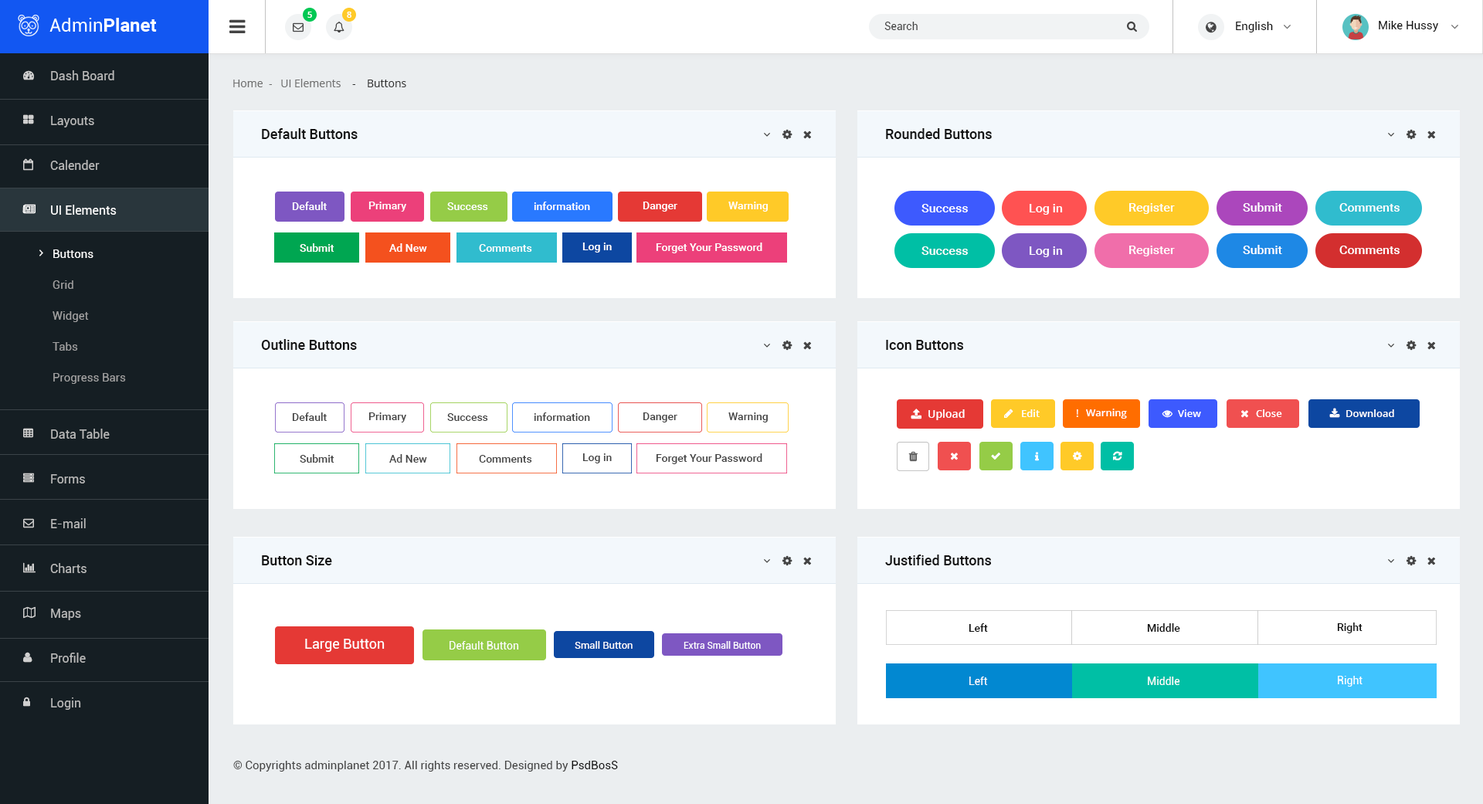
<style>
.page{position:relative;width:1483px;height:804px;background:#ffffff}
.page>*{position:absolute;margin:0}
.t1{font:8.5px "OpenSans-Semibold";color:#ffffff}
.t2{font:10.8px "Roboto-Regular";color:#444444}
.t3{font:11.6px "Roboto-Regular";color:#111111}
.t4{font:12.4px/44.8px "Roboto-Regular";color:#b9b9b9}
.t5{font:12.4px/44.8px "Roboto-Regular";color:#ffffff}
.t6{font:10.8px "OpenSans";color:#707070}
.t7{font:10.8px "OpenSans";color:#333333}
.t8{font:13.9px "Roboto-Medium";color:#111111}
.t9{font:10.8px "Roboto-Medium";color:#ffffff}
.t10{font:12.4px "Roboto-Medium";color:#ffffff}
.t11{font:11.6px/30.9px "Roboto-Regular";color:#a0a0a0}
.t12{font:11.6px/30.9px "Roboto-Regular";color:#ffffff}
.t13{font:10.8px "Roboto-Medium";color:#444444}
.t14{font:10.8px "OpenSans-Semibold";color:#ffffff}
.t15{font:10px "OpenSans-Semibold";color:#ffffff}
.t16{font:10.8px "OpenSans";color:#ffffff}
.t17{font:10.8px "Roboto-Medium";color:#111111}
.t18{font:13.9px "Roboto-Regular";color:#ffffff}
.t19{font:10.8px "Roboto-Regular";color:#ffffff}
.t20{font:10px "Roboto-Regular";color:#ffffff}
.t21{font:9.3px "Roboto-Regular";color:#ffffff}
.t22{font:11.6px "Roboto-Regular";color:#444444}
</style>
<div class="page">
<p class="t1" style="left:307px;top:12px;width:5px;height:6px">5</p>
<p class="t1" style="left:347px;top:12px;width:4px;height:6px">8</p>
<p class="t2" style="left:884px;top:22px;width:34px;height:8px">Search</p>
<p class="t3" style="left:1236px;top:22px;width:37px;height:10px">English</p>
<p class="t3" style="left:1379px;top:21px;width:59px;height:11px">Mike Hussy</p>
<p class="t4" style="left:50px;top:70px;width:67px;height:640px">Dash Board<br>Layouts<br>Calender<br><span class="t5">UI Elements<br></span><br><br><br><br>Data Table<br>Forms<br>E-mail<br>Charts<br>Maps<br>Profile<br>Login</p>
<p class="t6" style="left:233px;top:79px;width:173px;height:8px">Home  -   UI Elements   <span class="t7"> -    Buttons</span></p>
<p class="t8" style="left:262px;top:128px;width:96px;height:11px">Default Buttons</p>
<p class="t8" style="left:886px;top:128px;width:106px;height:11px">Rounded Buttons</p>
<p class="t9" style="left:292px;top:202px;width:35px;height:8px">Default</p>
<p class="t9" style="left:368px;top:202px;width:38px;height:10px">Primary</p>
<p class="t9" style="left:447px;top:202px;width:41px;height:8px">Success</p>
<p class="t9" style="left:534px;top:202px;width:56px;height:8px">information</p>
<p class="t9" style="left:643px;top:202px;width:34px;height:10px">Danger</p>
<p class="t9" style="left:728px;top:202px;width:40px;height:10px">Warning</p>
<p class="t10" style="left:921px;top:204px;width:47px;height:8px">Success</p>
<p class="t10" style="left:1030px;top:204px;width:33px;height:11px">Log in</p>
<p class="t10" style="left:1129px;top:203px;width:46px;height:11px">Register</p>
<p class="t10" style="left:1243px;top:202px;width:39px;height:10px">Submit</p>
<p class="t10" style="left:1339px;top:203px;width:61px;height:9px">Comments</p>
<p class="t9" style="left:300px;top:243px;width:34px;height:9px">Submit</p>
<p class="t9" style="left:389px;top:243px;width:38px;height:9px">Ad New</p>
<p class="t9" style="left:479px;top:244px;width:53px;height:8px">Comments</p>
<p class="t9" style="left:582px;top:243px;width:30px;height:10px">Log in</p>
<p class="t9" style="left:656px;top:243px;width:106px;height:10px">Forget Your Password</p>
<p class="t10" style="left:1129px;top:246px;width:46px;height:10px">Register</p>
<p class="t10" style="left:1243px;top:245px;width:39px;height:9px">Submit</p>
<p class="t10" style="left:1339px;top:246px;width:61px;height:8px">Comments</p>
<p class="t11" style="left:53px;top:249px;width:73px;height:135px"><span class="t12">Buttons<br></span>Grid<br>Widget<br>Tabs<br>Progress Bars</p>
<p class="t10" style="left:921px;top:246px;width:47px;height:9px">Success</p>
<p class="t10" style="left:1030px;top:246px;width:33px;height:11px">Log in</p>
<p class="t8" style="left:261px;top:339px;width:96px;height:11px">Outline Buttons</p>
<p class="t8" style="left:886px;top:340px;width:78px;height:10px">Icon Buttons</p>
<p class="t13" style="left:292px;top:412px;width:35px;height:9px">Default</p>
<p class="t13" style="left:368px;top:412px;width:38px;height:11px">Primary</p>
<p class="t13" style="left:447px;top:413px;width:41px;height:8px">Success</p>
<p class="t13" style="left:534px;top:412px;width:56px;height:9px">information</p>
<p class="t13" style="left:643px;top:412px;width:34px;height:11px">Danger</p>
<p class="t13" style="left:728px;top:412px;width:40px;height:11px">Warning</p>
<p class="t14" style="left:928px;top:409px;width:37px;height:11px">Upload</p>
<p class="t15" style="left:1022px;top:409px;width:18px;height:8px">Edit</p>
<p class="t16" style="left:1076px;top:409px;width:2px;height:8px">!</p>
<p class="t15" style="left:1086px;top:409px;width:41px;height:10px">Warning</p>
<p class="t15" style="left:1178px;top:409px;width:23px;height:8px">View</p>
<p class="t15" style="left:1256px;top:409px;width:26px;height:8px">Close</p>
<p class="t15" style="left:1346px;top:409px;width:48px;height:8px">Download</p>
<p class="t13" style="left:300px;top:454px;width:34px;height:9px">Submit</p>
<p class="t13" style="left:389px;top:454px;width:38px;height:9px">Ad New</p>
<p class="t13" style="left:479px;top:455px;width:53px;height:8px">Comments</p>
<p class="t13" style="left:582px;top:453px;width:30px;height:10px">Log in</p>
<p class="t13" style="left:656px;top:453px;width:106px;height:11px">Forget Your Password</p>
<p class="t8" style="left:262px;top:555px;width:70px;height:10px">Button Size</p>
<p class="t8" style="left:885px;top:555px;width:107px;height:10px">Justified Buttons</p>
<p class="t17" style="left:969px;top:623px;width:19px;height:9px">Left</p>
<p class="t17" style="left:1147px;top:623px;width:33px;height:9px">Middle</p>
<p class="t17" style="left:1337px;top:623px;width:26px;height:10px">Right</p>
<p class="t18" style="left:305px;top:639px;width:80px;height:13px">Large Button</p>
<p class="t19" style="left:450px;top:641px;width:69px;height:9px">Default Button</p>
<p class="t20" style="left:575px;top:641px;width:58px;height:8px">Small Button</p>
<p class="t21" style="left:684px;top:641px;width:77px;height:8px">Extra Small Button</p>
<p class="t19" style="left:969px;top:677px;width:19px;height:8px">Left</p>
<p class="t19" style="left:1148px;top:677px;width:32px;height:8px">Middle</p>
<p class="t19" style="left:1338px;top:676px;width:25px;height:11px">Right</p>
<p class="t22" style="left:233px;top:761px;width:385px;height:11px">© Copyrights adminplanet 2017. All rights reserved. Designed by <span class="t3">PsdBosS</span></p>
</div>
